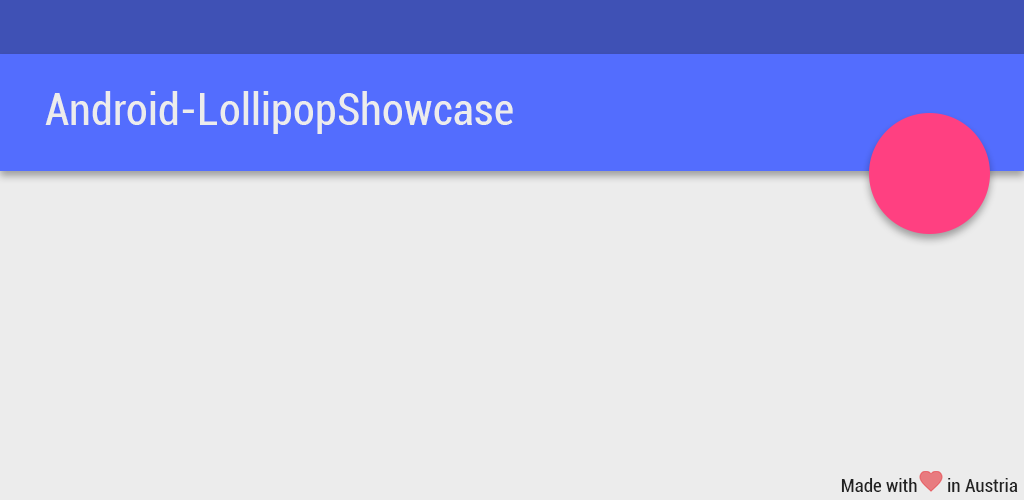
<style>
.page{position:relative;width:1024px;height:500px;background:#ececec}
.page>*{position:absolute;margin:0}
.t1{font:44.5px "Roboto-Condensed";color:#ececec}
.t2{font:19.1px "Roboto-Condensed";color:#212121}
</style>
<div class="page">
<p class="t1" style="left:45px;top:91px;width:468px;height:43px">Android-LollipopShowcase</p>
<p class="t2" style="left:841px;top:478px;width:177px;height:14px">Made with       in Austria</p>
</div>
